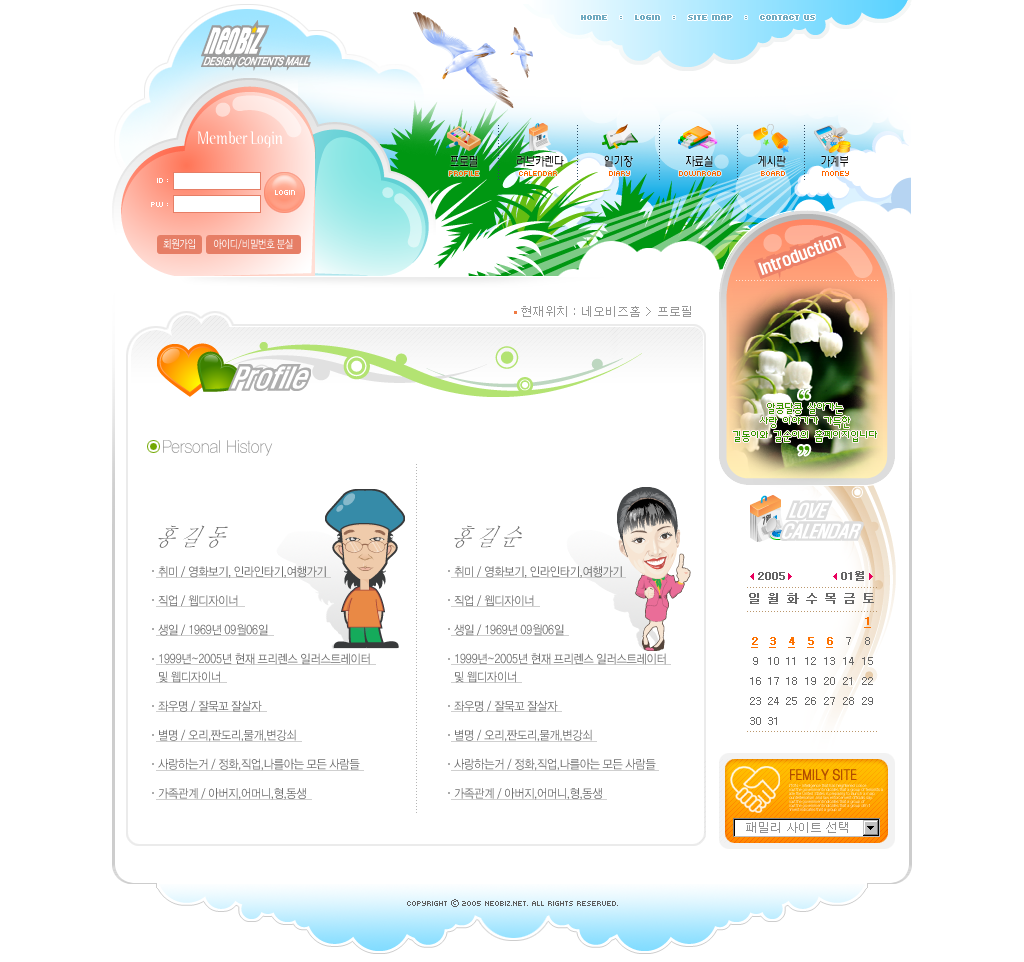
<style>
.page{position:relative;width:1024px;height:962px;background:#ffffff}
.page>*{position:absolute;margin:0}
.t1{font:8px "Kroeger0555";color:#6fabc2;font-weight:bold}
.t2{font:18px "BinaryITCTTLight";color:#ffffff;scale:0.8 1}
.t3{font:13px "H2wulL";letter-spacing:-0.025em;color:#000000;scale:0.75 1}
.t4{font:8px "Kroeger0555";color:#ff6600}
.t5{font:8px/24px "Kroeger0555";color:#ffffff}
.t6{font:8px "Kroeger0555";color:#ffffff}
.t7{font:11px "YDIWebDotum";color:#ffffff;scale:0.8 1}
.t8{font:12px "Dotum";color:#979797}
.t9{font:12px/14px "Á¤9";color:#359700}
.t10{font:18px "YDIYGO110-KSCPC-EUC-H";color:#979797;scale:0.9 1}
.t11{font:25.8px "YDIYMjO110-KSCPC-EUC-H";color:#707070;font-style:italic;scale:0.75 1}
.t12{font:12px/29.1px "YDIWebDotum";color:#707070;scale:0.9 1}
.t13{font:12px/18px "YDIWebDotum";color:#707070;scale:0.9 1}
.t14{font:14px "YDIWebDotum";color:#b24c00;font-weight:bold;scale:0.83 1}
.t15{font:12px "Dotum";color:#919191}
.t16{font:8px "Kroeger0555";color:#5d5d5d}
.t17{font:8px "YDIWebDotum";color:#5d5d5d}
</style>
<div class="page">
<p class="t1" style="left:581px;top:15px;width:234px;height:5px">Home   :   login   :   Site map   :   Contact us</p>
<p class="t2" style="left:197px;top:131px;width:86px;height:17px">Member Login</p>
<p class="t3" style="left:450px;top:155px;width:398px;height:13px">프로필             러브카렌다              일기장                  자료실               게시판            가계부</p>
<p class="t4" style="left:449px;top:171px;width:400px;height:5px">profile             calendar                 diary                downroad             board            money</p>
<p class="t5" style="left:151px;top:178px;width:17px;height:29px;text-align:right">id :<br>pw :</p>
<p class="t6" style="left:275px;top:190px;width:20px;height:5px">login</p>
<p class="t7" style="left:163px;top:239px;width:130px;height:10px">회원가입        아이디/비밀번호 분실</p>
<p class="t8" style="left:521px;top:306px;width:170px;height:11px">현재위치 : 네오비즈홈 &gt; 프로필</p>
<p class="t9" style="left:733px;top:403px;width:144px;height:39px;text-align:center">알콩달콩 살아가는 <br>사랑 이야기가 가득한<br>길동이와 길순이의 홈페이지입니다</p>
<p class="t10" style="left:163px;top:440px;width:110px;height:16px">Personal History</p>
<p class="t11" style="left:158px;top:525px;width:364px;height:23px">홍 길 동                                  홍 길 순</p>
<p class="t12" style="left:158px;top:566px;width:212px;height:234px">취미 / 영화보기, 인라인타기,여행가기<br>직업 / 웹디자이너<br>생일 / 1969년 09월06일<br>1999년~2005년 현재 프리렌스 일러스트레이터 <br><span class="t13">및 웹디자이너<br></span>좌우명 / 잘묵꼬 잘살자<br>별명 / 오리,짠도리,물개,변강쇠<br>사랑하는거 / 정화,직업,나를아는 모든 사람들<br>가족관계 / 아버지,어머니,형,동생</p>
<p class="t12" style="left:454px;top:566px;width:212px;height:234px">취미 / 영화보기, 인라인타기,여행가기<br>직업 / 웹디자이너<br>생일 / 1969년 09월06일<br>1999년~2005년 현재 프리렌스 일러스트레이터 <br><span class="t13">및 웹디자이너<br></span>좌우명 / 잘묵꼬 잘살자<br>별명 / 오리,짠도리,물개,변강쇠<br>사랑하는거 / 정화,직업,나를아는 모든 사람들<br>가족관계 / 아버지,어머니,형,동생</p>
<p class="t14" style="left:790px;top:768px;width:67px;height:13px">FEMILY SITE</p>
<p class="t15" style="left:746px;top:822px;width:102px;height:11px">패밀리 사이트 선택</p>
<p class="t16" style="left:407px;top:899px;width:211px;height:8px">Copyright <span class="t17">ⓒ</span> 2005 NEOBIZ.NET. All rights reserved.</p>
</div>
